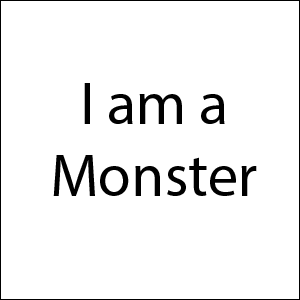
<style>
.page{position:relative;width:300px;height:300px;background:#ffffff}
.page>*{position:absolute;margin:0}
.t1{font:60px "MyriadPro-Regular";color:#000000}
</style>
<div class="page">
<p class="t1" style="left:53px;top:83px;width:204px;height:113px;text-align:center">I am a Monster</p>
</div>
